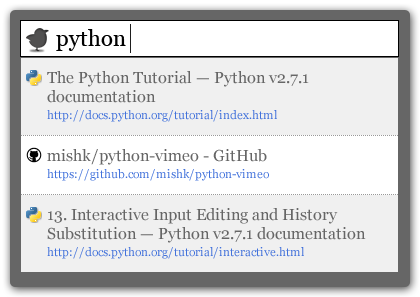
<style>
.page{position:relative;width:420px;height:297px;background:#f0f0f0}
.page>*{position:absolute;margin:0}
.t1{font:22px "Georgia";color:#000000}
.t2{font:16px/19px "Georgia";color:#666666}
.t3{font:12px/17px "Georgia";color:#4272db}
</style>
<div class="page">
<p class="t1" style="left:56px;top:29px;width:70px;height:22px">python</p>
<p class="t2" style="left:47px;top:71px;width:262px;height:51px">The Python Tutorial — Python v2.7.1 <br>documentation<br><span class="t3">http://docs.python.org/tutorial/index.html</span></p>
<p class="t3" style="left:47px;top:149px;width:222px;height:32px"><span class="t2">mishk/python-vimeo - GitHub<br></span>https://github.com/mishk/python-vimeo</p>
<p class="t2" style="left:47px;top:208px;width:319px;height:51px">13. Interactive Input Editing and History <br>Substitution — Python v2.7.1 documentation<br><span class="t3">http://docs.python.org/tutorial/interactive.html</span></p>
</div>
